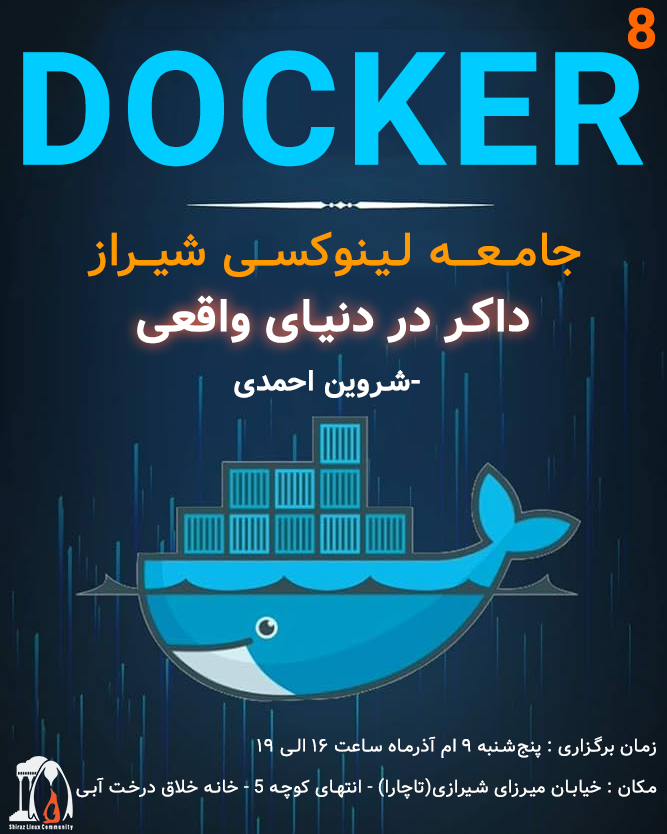
<style>
.page{position:relative;width:667px;height:834px}
.page>*{position:absolute;margin:0}
.t1{font:56px "Vazir-Bold";letter-spacing:0.035em;color:#ff6600;text-transform:uppercase}
.t2{font:158px "Vazir-Bold";letter-spacing:0.035em;color:#00ccff;text-transform:uppercase}
.t3{font:46px "Vazir-Medium";letter-spacing:0.035em;color:#ff9900;text-transform:uppercase}
.t4{font:46px "Vazir-Bold";letter-spacing:0.035em;color:#ffffff;text-transform:uppercase}
.t5{font:29px "Vazir-Bold";letter-spacing:0.035em;color:#ffffff;text-transform:uppercase}
.t6{font:18px "Vazir";letter-spacing:0.035em;color:#ffffff;text-transform:uppercase}
</style>
<div class="page">
<p class="t1" style="left:628px;top:7px;width:27px;height:42px">8</p>
<p class="t2" style="left:23px;top:50px;width:620px;height:117px">DOCKER</p>
<p class="t3" style="left:87px;top:231px;width:494px;height:46px">جامــعــه لـیـنوکسـی شیـراز</p>
<p class="t4" style="left:137px;top:295px;width:392px;height:49px">داکر در دنیای واقعی</p>
<p class="t5" style="left:234px;top:370px;width:186px;height:28px">شروین احمدی-</p>
<p class="t6" style="left:257px;top:736px;width:399px;height:22px">زمان برگزاری : پنج‌شنبه ۹ ام آذرماه ساعت ۱۶ الی ۱۹</p>
<p class="t6" style="left:76px;top:777px;width:581px;height:22px">مکان : خیابان میرزای شیرازی(تاچارا) - انتهای کوچه 5 - خانه خلاق درخت آبی</p>
</div>
